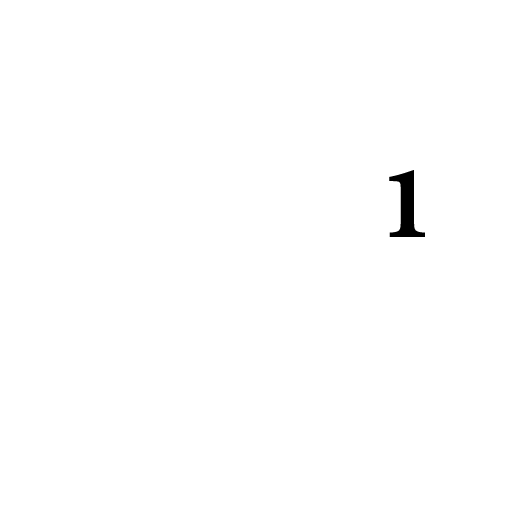
<style>
.page{position:relative;width:512px;height:512px;background:#ffffff}
.page>*{position:absolute;margin:0}
.t1{font:130.1px "AdobeGurmukhi-Bold";color:#000000}
</style>
<div class="page">
<p class="t1" style="left:389px;top:170px;width:36px;height:67px">1</p>
</div>
